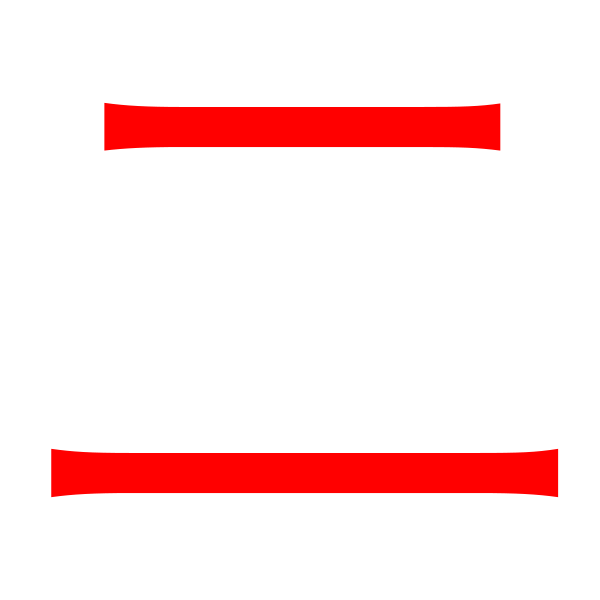
<style>
.page{position:relative;width:600px;height:600px;background:#ffffff}
.page>*{position:absolute;margin:0}
.t1{font:590px "HiraKakuProN-W3";color:#ff0000}
</style>
<div class="page">
<p class="t1" style="left:51px;top:102px;width:508px;height:396px">二</p>
</div>
